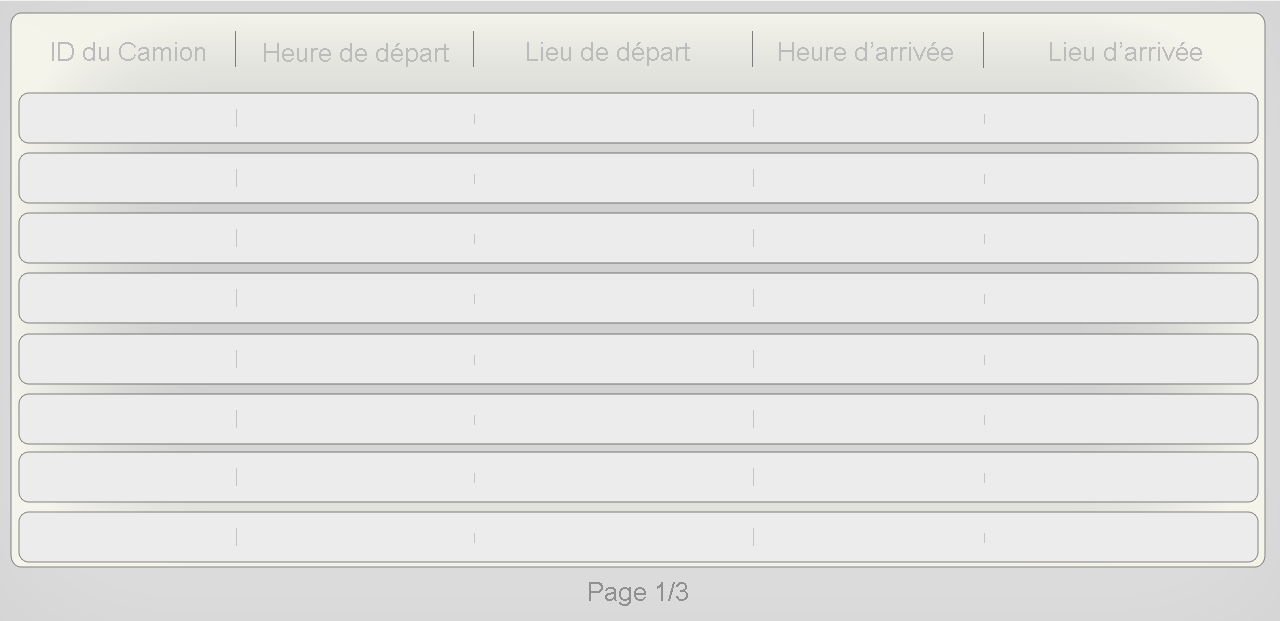
<style>
.page{position:relative;width:1280px;height:621px;background:#ececec}
.page>*{position:absolute;margin:0}
.t1{font:26px "ArialMT";color:#bcbcbc}
.t2{font:26px "ArialMT";color:#909090}
</style>
<div class="page">
<p class="t1" style="left:52px;top:42px;width:153px;height:19px">ID du Camion</p>
<p class="t1" style="left:264px;top:43px;width:185px;height:24px">Heure de départ</p>
<p class="t1" style="left:527px;top:42px;width:163px;height:24px">Lieu de départ</p>
<p class="t1" style="left:779px;top:42px;width:174px;height:19px">Heure d’arrivée</p>
<p class="t1" style="left:1050px;top:42px;width:152px;height:19px">Lieu d’arrivée</p>
<p class="t2" style="left:589px;top:582px;width:99px;height:24px">Page 1/3</p>
</div>
